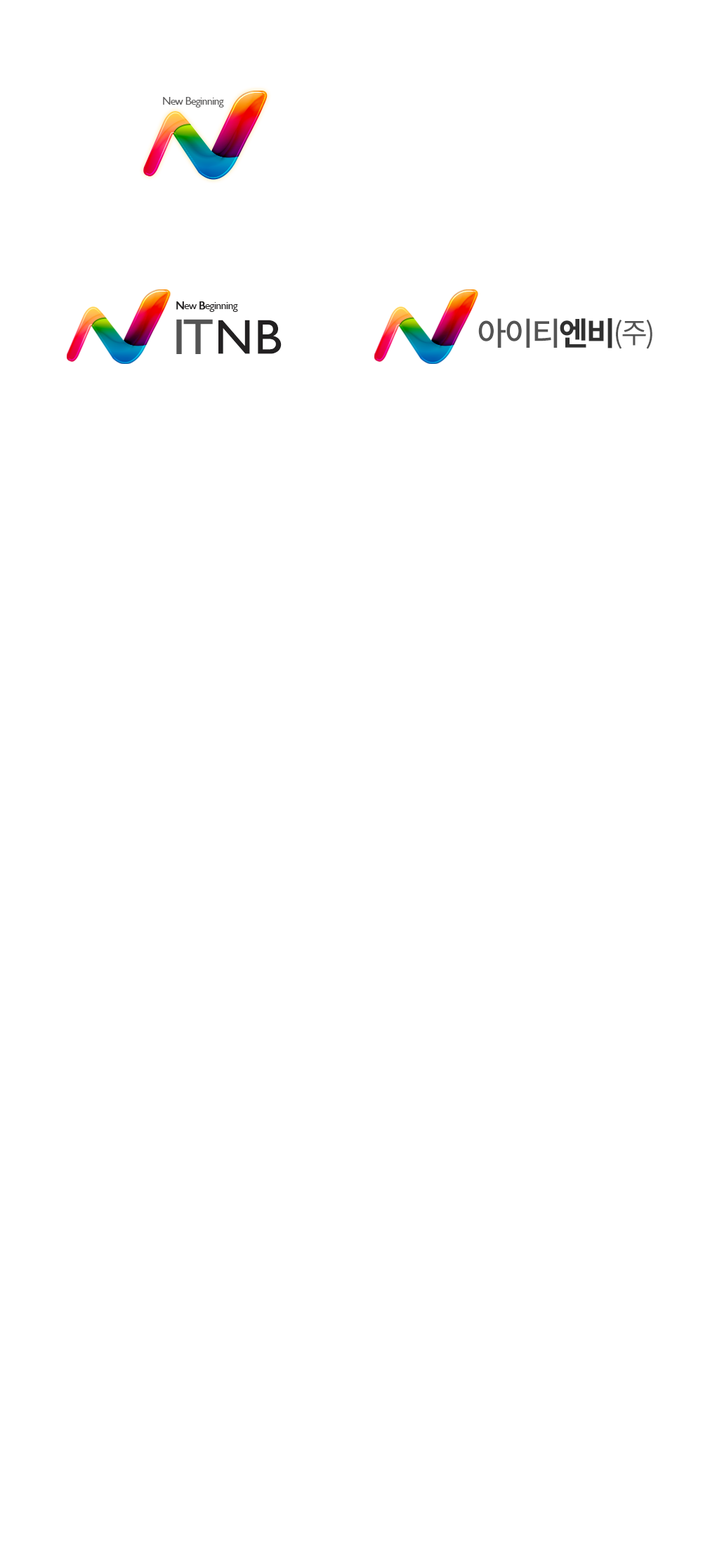
<style>
.page{position:relative;width:710px;height:1568px;background:#ffffff}
.page>*{position:absolute;margin:0}
.t1{font:11.2px "GillSansMT";letter-spacing:-0.05em;color:#5b5a5a}
.t2{font:11.2px "GillSansMT";letter-spacing:-0.05em;color:#5b5a5a;text-transform:uppercase}
.t3{font:11.2px "GillSansMT";letter-spacing:-0.05em;color:#222021}
.t4{font:11.2px "GillSansMT";letter-spacing:-0.05em;color:#222021;font-weight:bold}
.t5{font:11.2px "GillSansMT";letter-spacing:-0.05em;color:#222021;text-transform:uppercase;font-weight:bold}
.t6{font:50.6px "GillSansMT";letter-spacing:-0.05em;color:#545454;text-transform:uppercase}
.t7{font:49.2px "GillSansMT";letter-spacing:-0.05em;color:#222021;text-transform:uppercase}
.t8{font:32.3px "NotoSansCJKkr-Medium";letter-spacing:-0.075em;color:#545454;text-transform:uppercase}
.t9{font:32.3px "NotoSansCJKkr-Bold";letter-spacing:-0.075em;color:#303030;text-transform:uppercase}
.t10{font:28.8px "NotoSansCJKkr-Regular";letter-spacing:-0.075em;color:#545454;text-transform:uppercase}
</style>
<div class="page">
<p class="t1" style="left:163px;top:97px;width:61px;height:10px">New <span class="t2">b</span>eginning</p>
<p class="t3" style="left:176px;top:301px;width:62px;height:11px"><span class="t4">N</span>ew <span class="t5">b</span>eginning</p>
<p class="t6" style="left:176px;top:319px;width:106px;height:35px">IT<span class="t7">Nb</span></p>
<p class="t8" style="left:478px;top:318px;width:175px;height:31px">아이티<span class="t9">엔비</span><span class="t10">(주)</span></p>
</div>
